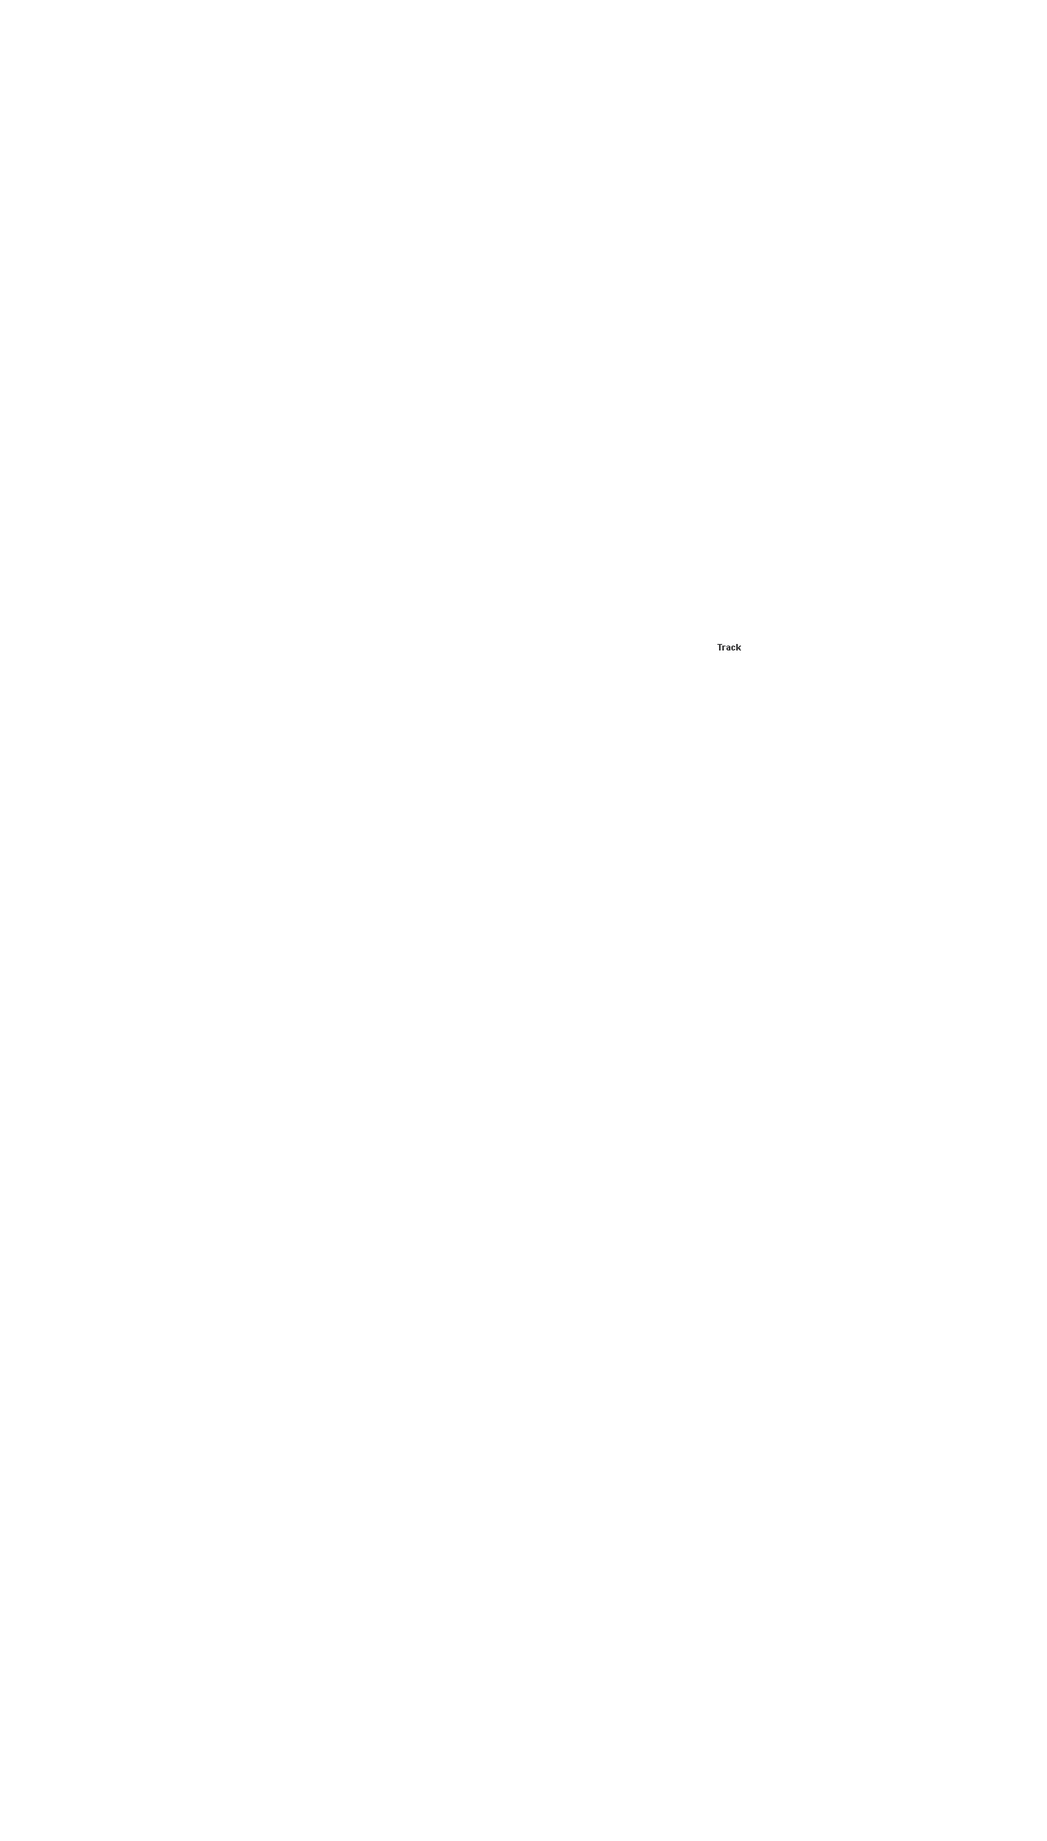
<style>
.page{position:relative;width:1047px;height:1841px;background:#ffffff}
.page>*{position:absolute;margin:0}
.t1{font:9px "Arial-BoldMT";color:#414142}
</style>
<div class="page">
<p class="t1" style="left:718px;top:644px;width:23px;height:6px">Track</p>
</div>
